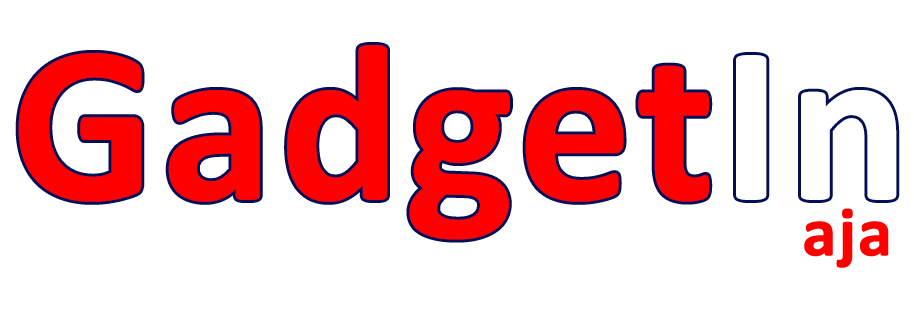
<style>
.page{position:relative;width:914px;height:313px;background:#ffffff}
.page>*{position:absolute;margin:0}
.t1{font:226.4px "Calibri-Bold";color:#ff0000;font-weight:bold}
.t2{font:226.4px "Calibri-Bold";color:#ffffff;font-weight:bold}
.t3{font:69.3px "Calibri-Bold";color:#ff0000;font-weight:bold}
</style>
<div class="page">
<p class="t1" style="left:18px;top:45px;width:879px;height:195px">Gadget<span class="t2">In</span></p>
<p class="t3" style="left:804px;top:208px;width:85px;height:60px">aja</p>
</div>
